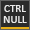
<style>
.page{position:relative;width:30px;height:30px;background:#2b2b2b}
.page>*{position:absolute;margin:0}
.t1{font:11px "Calibri";color:#eaeaea}
</style>
<div class="page">
<p class="t1" style="left:3px;top:5px;width:24px;height:18px">CTRL NULL</p>
</div>
